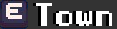
<style>
.page{position:relative;width:117px;height:29px;background:#333333}
.page>*{position:absolute;margin:0}
.t1{font:30px "ManaspaceReg";color:#ffffff}
</style>
<div class="page">
<p class="t1" style="left:36px;top:3px;width:76px;height:23px">Town</p>
</div>
